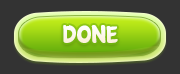
<style>
.page{position:relative;width:180px;height:74px;background:#333333}
.page>*{position:absolute;margin:0}
.t1{font:25px "Cartwheel";color:#ffffff}
</style>
<div class="page">
<p class="t1" style="left:63px;top:25px;width:55px;height:18px">DONE</p>
</div>
